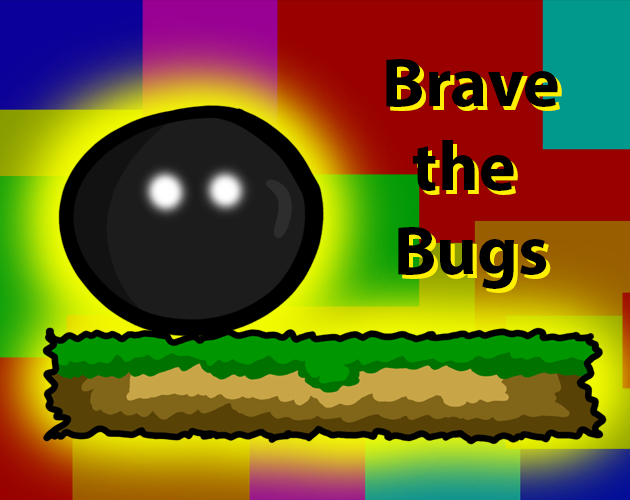
<style>
.page{position:relative;width:630px;height:500px}
.page>*{position:absolute;margin:0}
.t1{font:70px "MyriadPro-Bold";color:#000000}
</style>
<div class="page">
<p class="t1" style="left:386px;top:59px;width:172px;height:230px;text-align:center">Brave<br>the <br>Bugs</p>
</div>
